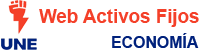
<style>
.page{position:relative;width:210px;height:50px;background:#ffffff}
.page>*{position:absolute;margin:0}
.t1{font:18.8px "Arial-BoldMT";color:#f44029}
.t2{font:16.7px "Arial-BoldMT";color:#00217c;scale:0.95 1}
</style>
<div class="page">
<p class="t1" style="left:39px;top:9px;width:160px;height:18px">Web Activos Fijos</p>
<p class="t2" style="left:112px;top:33px;width:87px;height:15px">ECONOMÍA</p>
</div>
